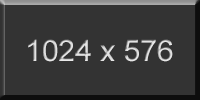
<style>
.page{position:relative;width:200px;height:100px;background:#333333}
.page>*{position:absolute;margin:0}
.t1{font:30px "ArialMT";color:#dddddd}
</style>
<div class="page">
<p class="t1" style="left:28px;top:39px;width:145px;height:23px">1024 x 576</p>
</div>
